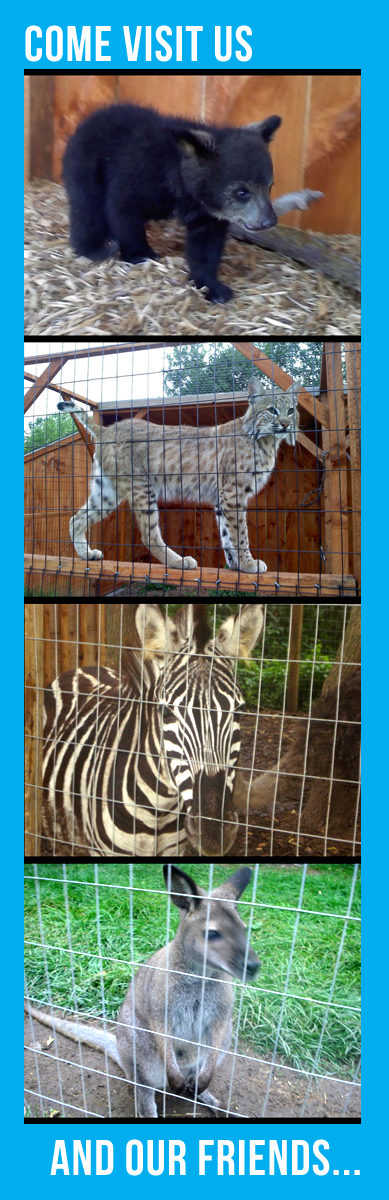
<style>
.page{position:relative;width:389px;height:1200px;background:#00aef0}
.page>*{position:absolute;margin:0}
.t1{font:50px "BebasNeue";letter-spacing:0.025em;color:#ffffff}
</style>
<div class="page">
<p class="t1" style="left:25px;top:25px;width:227px;height:37px">come visit us</p>
<p class="t1" style="left:50px;top:1139px;width:310px;height:37px">and our friends...</p>
</div>
